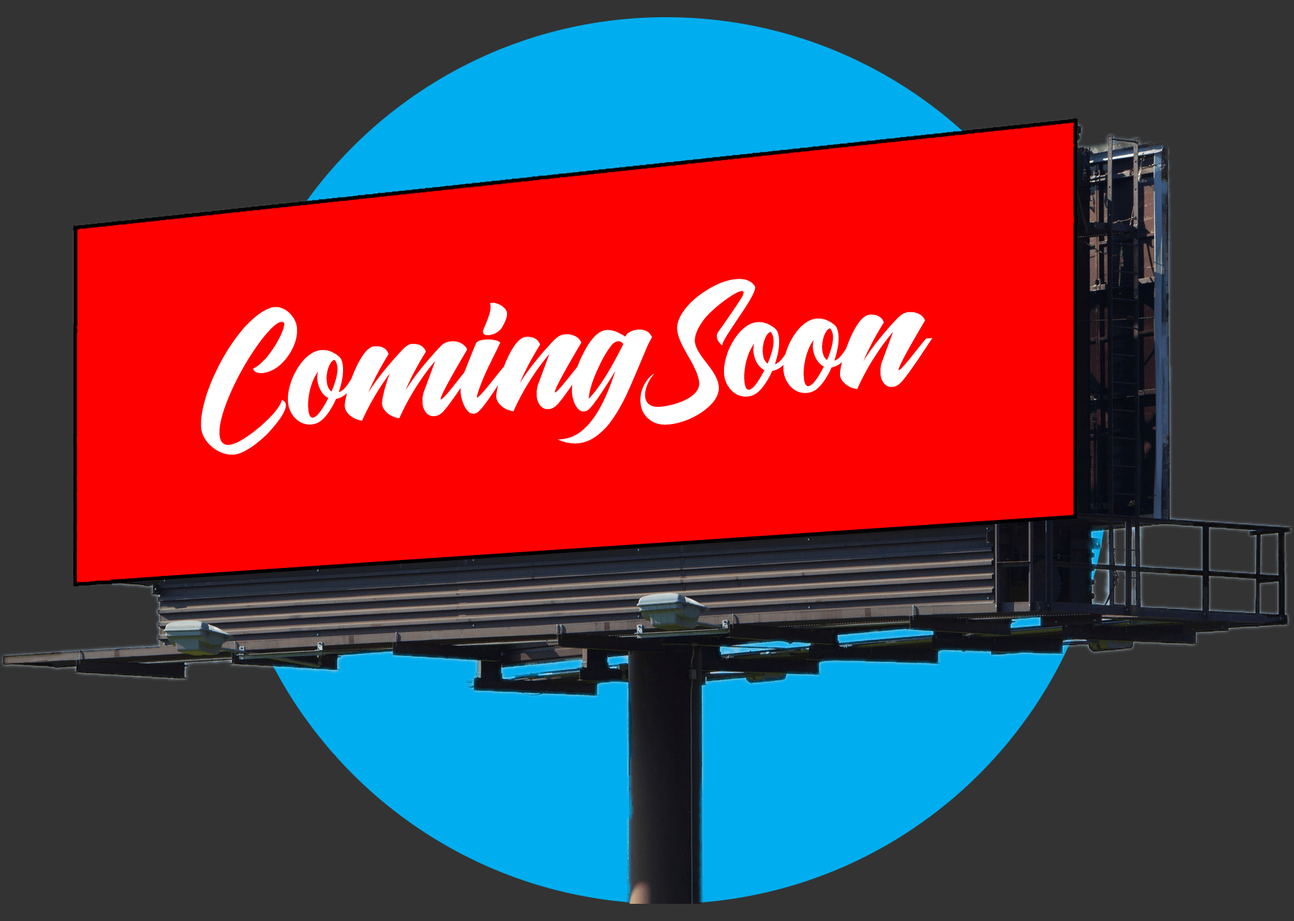
<style>
.page{position:relative;width:1294px;height:921px;background:#333333}
.page>*{position:absolute;margin:0}
.t1{font:214.9px "Maghrib";letter-spacing:-0.005em;color:#ffffff}
</style>
<div class="page">
<p class="t1" style="left:201px;top:279px;width:732px;height:176px;rotate:-4deg">ComingSoon</p>
</div>
